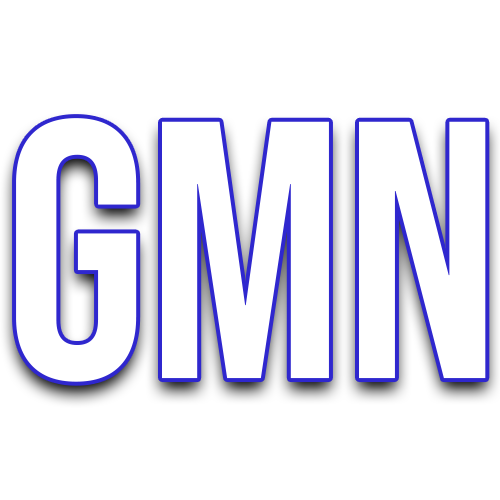
<style>
.page{position:relative;width:500px;height:500px;background:#ffffff}
.page>*{position:absolute;margin:0}
.t1{font:365.7px "BebasNeue-Regular";color:#ffffff}
</style>
<div class="page">
<p class="t1" style="left:16px;top:118px;width:470px;height:264px">GMN</p>
</div>
